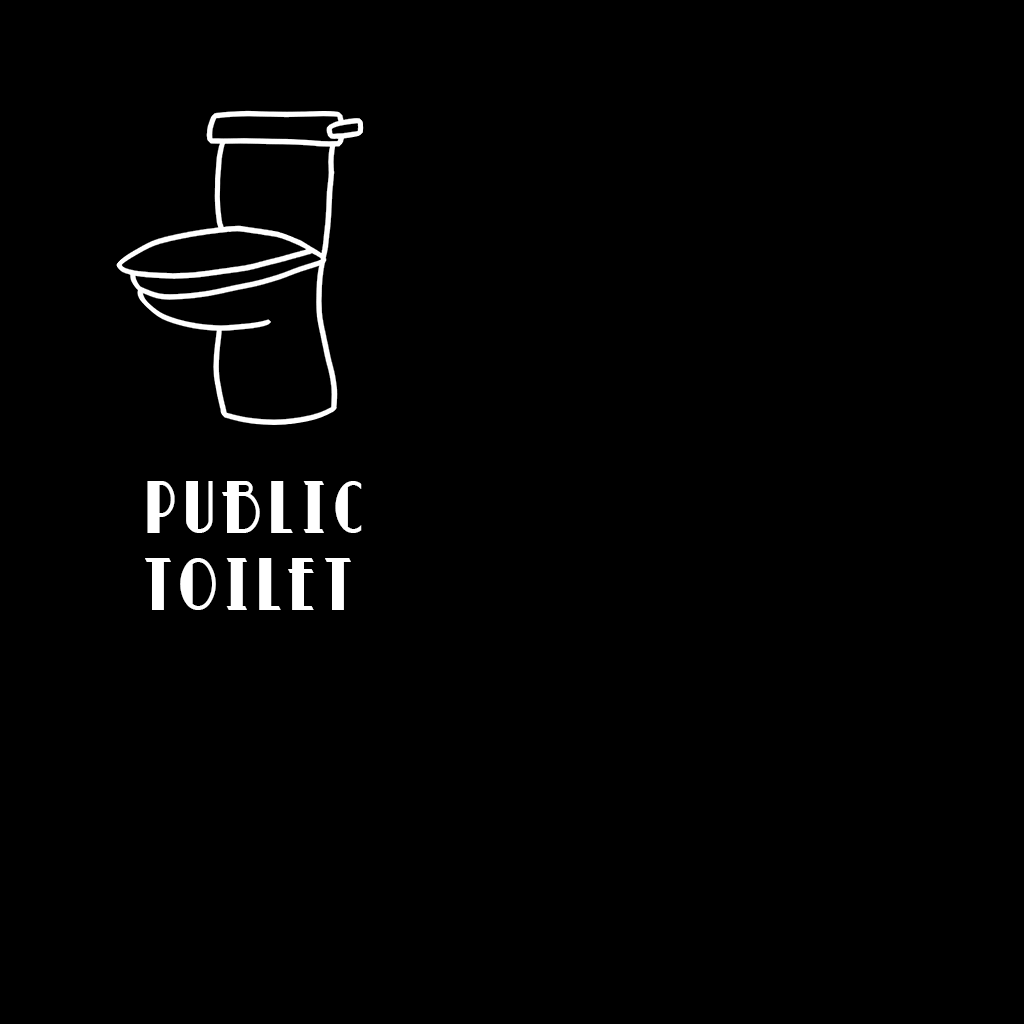
<style>
.page{position:relative;width:1024px;height:1024px;background:#000000}
.page>*{position:absolute;margin:0}
.t1{font:64.5px "BettyNoir";letter-spacing:0.1em;color:#ffffff}
</style>
<div class="page">
<p class="t1" style="left:145px;top:481px;width:217px;height:129px">PUBLIC<br>TOILET</p>
</div>
